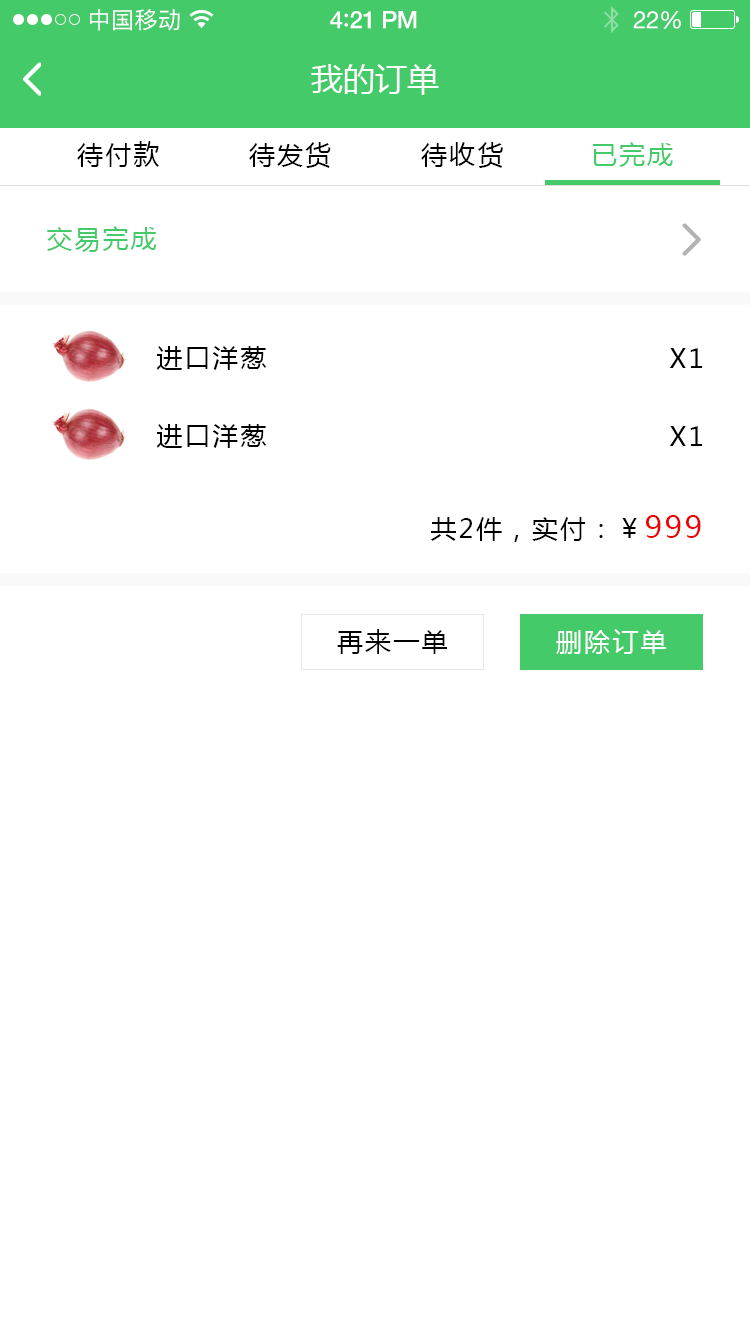
<style>
.page{position:relative;width:750px;height:1334px;background:#ffffff}
.page>*{position:absolute;margin:0}
.t1{font:23px "PingFangSC-Regular";letter-spacing:0.02em;color:#ffffff}
.t2{font:24px "HelveticaNeue-Medium";letter-spacing:-0.02em;color:#ffffff}
.t3{font:26px "Avenir-Medium";letter-spacing:-0.02em;color:#ffffff}
.t4{font:24px "HelveticaNeue";letter-spacing:-0.02em;color:#ffffff}
.t5{font:32px "MicrosoftYaHei";color:#ffffff;text-transform:uppercase}
.t6{font:26px "MicrosoftYaHei";letter-spacing:0.08em;color:#010101;text-transform:uppercase}
.t7{font:26px "MicrosoftYaHei";letter-spacing:0.08em;color:#000000;text-transform:uppercase}
.t8{font:26px "MicrosoftYaHei";letter-spacing:0.08em;color:#44ca68;text-transform:uppercase}
.t9{font:30px "MicrosoftYaHei";letter-spacing:0.08em;color:#ee0101;text-transform:uppercase}
.t10{font:26px "MicrosoftYaHei";letter-spacing:0.08em;color:#ffffff;text-transform:uppercase}
</style>
<div class="page">
<p class="t1" style="left:90px;top:9px;width:90px;height:22px">中国移动</p>
<p class="t2" style="left:330px;top:11px;width:87px;height:18px">4<span class="t3">:</span>21 PM</p>
<p class="t4" style="left:633px;top:11px;width:48px;height:18px">22%</p>
<p class="t5" style="left:311px;top:64px;width:128px;height:31px">我的订单</p>
<p class="t6" style="left:77px;top:141px;width:82px;height:26px">待付款</p>
<p class="t7" style="left:249px;top:142px;width:82px;height:26px">待发货</p>
<p class="t7" style="left:421px;top:142px;width:82px;height:26px">待收货</p>
<p class="t8" style="left:593px;top:142px;width:80px;height:25px">已完成</p>
<p class="t8" style="left:47px;top:226px;width:110px;height:26px">交易完成</p>
<p class="t7" style="left:156px;top:346px;width:111px;height:24px">进口洋葱</p>
<p class="t7" style="left:669px;top:348px;width:34px;height:20px">x1</p>
<p class="t7" style="left:156px;top:424px;width:111px;height:24px">进口洋葱</p>
<p class="t7" style="left:669px;top:426px;width:34px;height:20px">x1</p>
<p class="t7" style="left:431px;top:515px;width:270px;height:27px">共2件，实付：￥<span class="t9">999</span></p>
<p class="t7" style="left:337px;top:629px;width:110px;height:25px">再来一单</p>
<p class="t10" style="left:556px;top:629px;width:110px;height:25px">删除订单</p>
</div>
